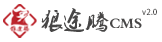
<style>
.page{position:relative;width:162px;height:42px;background:#ffffff}
.page>*{position:absolute;margin:0}
.t1{font:23px "2.0-";color:#474646}
.t2{font:15px "2.0-";letter-spacing:-0.02em;color:#474646}
.t3{font:8px "AdobeHeitiStd-Regular";color:#474646}
</style>
<div class="page">
<p class="t1" style="left:41px;top:8px;width:101px;height:24px">狼途腾<span class="t2">CMS</span></p>
<p class="t3" style="left:142px;top:8px;width:15px;height:7px">v2.0</p>
</div>
